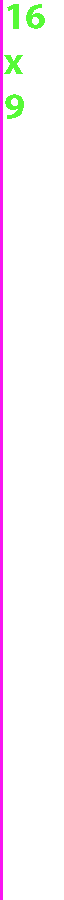
<style>
.page{position:relative;width:64px;height:900px;background:#ffffff}
.page>*{position:absolute;margin:0}
.t1{font:37.8px "MyriadPro-Bold";color:#57fa37}
</style>
<div class="page">
<p class="t1" style="left:4px;top:4px;width:41px;height:115px">16<br>х<br>9</p>
</div>
